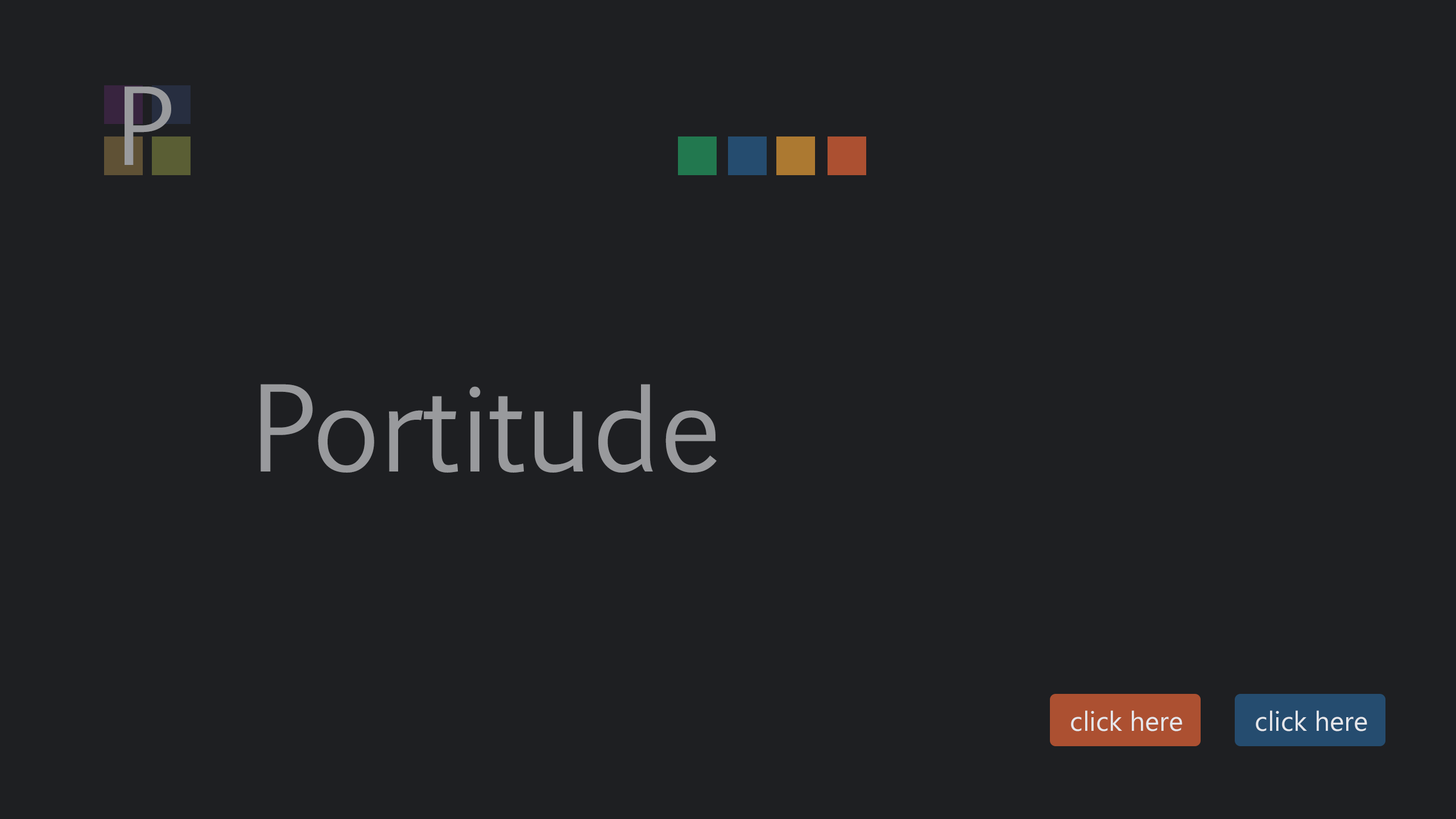
<style>
.page{position:relative;width:1456px;height:819px;background:#1e1f22}
.page>*{position:absolute;margin:0}
.t1{font:102.4px "EuphemiaCAS";color:#999a9d}
.t2{font:113.7px "EuphemiaCAS";color:#999a9d}
.t3{font:27.3px "Ebrima";color:#e6e7eb}
</style>
<div class="page">
<p class="t1" style="left:125px;top:86px;width:46px;height:79px">P</p>
<p class="t2" style="left:260px;top:384px;width:457px;height:89px">Portitude</p>
<p class="t3" style="left:1071px;top:710px;width:111px;height:21px">click here</p>
<p class="t3" style="left:1256px;top:710px;width:111px;height:21px">click here</p>
</div>
